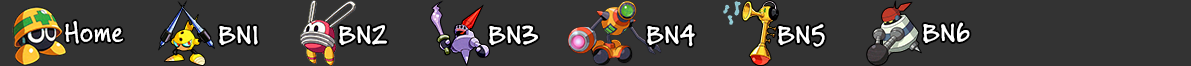
<style>
.page{position:relative;width:1191px;height:66px;background:#333333}
.page>*{position:absolute;margin:0}
.t1{font:30px "BuxtonSketch";color:#ffffff}
</style>
<div class="page">
<p class="t1" style="left:65px;top:21px;width:58px;height:23px">Home</p>
<p class="t1" style="left:219px;top:25px;width:39px;height:20px">BN1</p>
<p class="t1" style="left:339px;top:25px;width:48px;height:20px">BN2</p>
<p class="t1" style="left:489px;top:25px;width:49px;height:20px">BN3</p>
<p class="t1" style="left:647px;top:24px;width:48px;height:23px">BN4</p>
<p class="t1" style="left:778px;top:24px;width:47px;height:23px">BN5</p>
<p class="t1" style="left:923px;top:22px;width:47px;height:21px">BN6</p>
</div>
